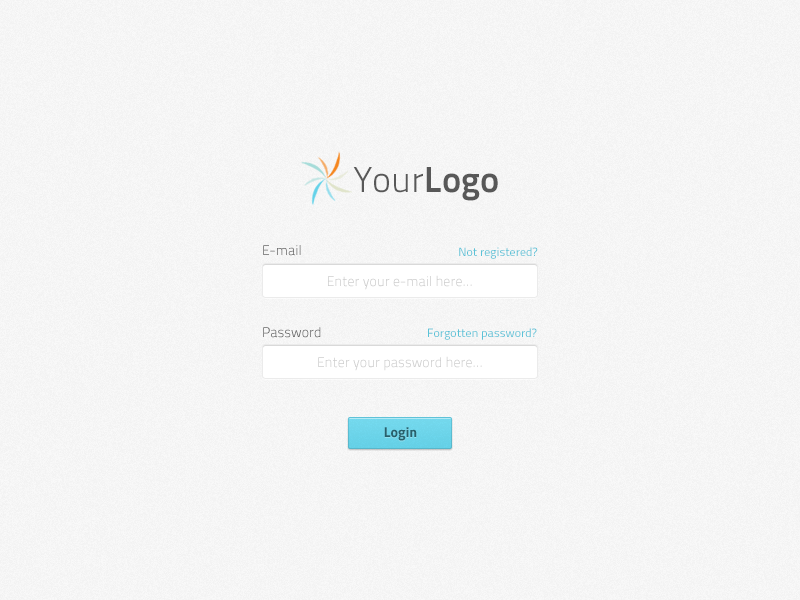
<style>
.page{position:relative;width:800px;height:600px}
.page>*{position:absolute;margin:0}
.t1{font:36px "TitilliumText22L-Light";color:#585858}
.t2{font:36px "TitilliumText22L-Bold";color:#585858}
.t3{font:14px "TitilliumText22L-Light"}
.t4{font:12px "TitilliumText22L-Regular";color:#5ac2d7}
.t5{font:14px "TitilliumText22L-Light";color:#cccccc}
.t6{font:14px "TitilliumText22L-XBold";color:#28616d}
</style>
<div class="page">
<p class="t1" style="left:353px;top:167px;width:145px;height:34px">Your<span class="t2">Logo</span></p>
<p class="t3" style="left:263px;top:245px;width:38px;height:11px">E-mail</p>
<p class="t4" style="left:459px;top:247px;width:79px;height:12px">Not registered?</p>
<p class="t5" style="left:328px;top:275px;width:144px;height:15px">Enter your e-mail here...</p>
<p class="t3" style="left:263px;top:327px;width:58px;height:11px">Password</p>
<p class="t4" style="left:428px;top:328px;width:109px;height:12px">Forgotten password?</p>
<p class="t5" style="left:318px;top:356px;width:164px;height:15px">Enter your password here...</p>
<p class="t6" style="left:384px;top:427px;width:33px;height:14px">Login</p>
</div>
